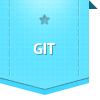
<style>
.page{position:relative;width:100px;height:100px;background:#ffffff}
.page>*{position:absolute;margin:0}
.t1{font:15px "MyriadPro-Bold";letter-spacing:-0.025em;color:#ffffff;text-transform:uppercase}
</style>
<div class="page">
<p class="t1" style="left:33px;top:43px;width:22px;height:11px">GIT</p>
</div>
